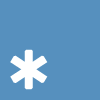
<style>
.page{position:relative;width:100px;height:100px;background:#5690be}
.page>*{position:absolute;margin:0}
.t1{font:96px "AndaleMono";letter-spacing:0.05em;color:#ffffff;font-weight:bold}
</style>
<div class="page">
<p class="t1" style="left:10px;top:49px;width:38px;height:41px">*</p>
</div>
